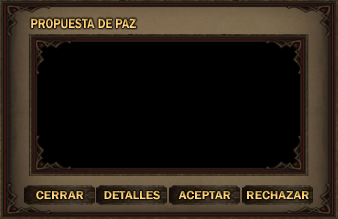
<style>
.page{position:relative;width:338px;height:219px;background:#000000}
.page>*{position:absolute;margin:0}
.t1{font:14px "FranklinGothic-Demi";scale:0.86 1}
.t2{font:12px "FranklinGothic-Demi";scale:1.07 1}
</style>
<div class="page">
<p class="t1" style="left:31px;top:18px;width:105px;height:11px">PROPUESTA DE PAZ</p>
<p class="t2" style="left:36px;top:190px;width:48px;height:10px">CERRAR</p>
<p class="t2" style="left:104px;top:190px;width:56px;height:10px">DETALLES</p>
<p class="t2" style="left:178px;top:190px;width:53px;height:10px">ACEPTAR</p>
<p class="t2" style="left:247px;top:190px;width:62px;height:10px">RECHAZAR</p>
</div>
